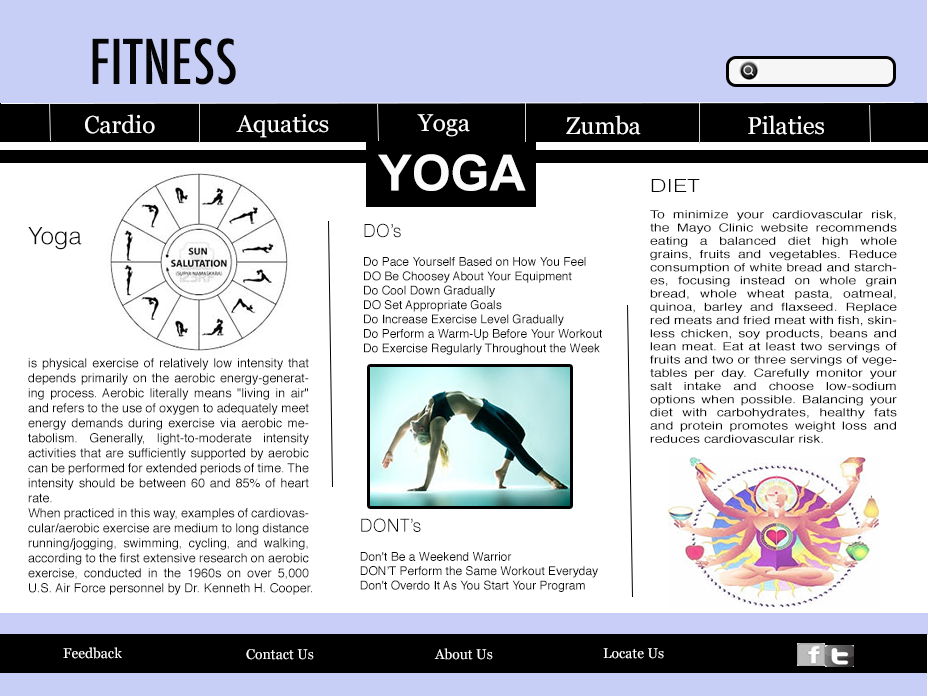
<style>
.page{position:relative;width:928px;height:696px;background:#ffffff}
.page>*{position:absolute;margin:0}
.t1{font:60px "Futura-CondensedMedium";color:#050505}
.t2{font:24px "Georgia";color:#fcfcfd}
.t3{font:50px "Arial-BoldMT";color:#fbfbfb}
.t4{font:11px "Helvetica";color:#080808;scale:1.28 1}
.t5{font:18px "Helvetica-Light";color:#080808;scale:1.28 1}
.t6{font:12.5px "Helvetica";color:#080808}
.t7{font:24px "Helvetica-Light";color:#080808}
.t8{font:12px "Helvetica";color:#080808}
.t9{font:18px "Helvetica-Light";color:#080808}
.t10{font:14px "Georgia";color:#fefdfe}
</style>
<div class="page">
<p class="t1" style="left:92px;top:38px;width:144px;height:47px">FITNESS</p>
<p class="t2" style="left:85px;top:114px;width:70px;height:20px">Cardio</p>
<p class="t2" style="left:236px;top:114px;width:93px;height:24px">Aquatics</p>
<p class="t2" style="left:417px;top:114px;width:53px;height:23px">Yoga</p>
<p class="t2" style="left:566px;top:115px;width:75px;height:20px">Zumba</p>
<p class="t2" style="left:748px;top:115px;width:76px;height:20px">Pilaties</p>
<p class="t3" style="left:378px;top:154px;width:148px;height:37px">YOGA</p>
<p class="t4" style="left:650px;top:179px;width:247px;height:264px"><span class="t5">DIET<br></span><br>To minimize your cardiovascular risk, the Mayo Clinic website recommends eating a balanced diet high whole grains, fruits and vegetables. Reduce consumption of white bread and starches, focusing instead on whole grain bread, whole wheat pasta, oatmeal, quinoa, barley and flaxseed. Replace red meats and fried meat with fish, skinless chicken, soy products, beans and lean meat. Eat at least two servings of fruits and two or three servings of vegetables per day. Carefully monitor your salt intake and choose low-sodium options when possible. Balancing your diet with carbohydrates, healthy fats and protein promotes weight loss and reduces cardiovascular risk.</p>
<p class="t6" style="left:28px;top:227px;width:284px;height:368px"><span class="t7">Yoga<br><br><br><br> <br><br><br></span>is physical exercise of relatively low intensity that depends primarily on the aerobic energy-generating process. Aerobic literally means "living in air" and refers to the use of oxygen to adequately meet energy demands during exercise via aerobic metabolism. Generally, light-to-moderate intensity activities that are sufficiently supported by aerobic can be performed for extended periods of time. The intensity should be between 60 and 85% of heart rate.<br>When practiced in this way, examples of cardiovascular/aerobic exercise are medium to long distance running/jogging, swimming, cycling, and walking, according to the first extensive research on aerobic exercise, conducted in the 1960s on over 5,000 U.S. Air Force personnel by Dr. Kenneth H. Cooper.</p>
<p class="t8" style="left:364px;top:223px;width:238px;height:132px"><span class="t9">DO’s<br></span><br>Do Pace Yourself Based on How You Feel<br>DO Be Choosey About Your Equipment<br>Do Cool Down Gradually<br>DO Set Appropriate Goals<br>Do Increase Exercise Level Gradually<br>Do Perform a Warm-Up Before Your Workout<br>Do Exercise Regularly Throughout the Week</p>
<p class="t8" style="left:360px;top:518px;width:238px;height:74px"><span class="t9">DONT’s<br><br></span>Don't Be a Weekend Warrior<br>DON’T Perform the Same Workout Everyday<br>Don't Overdo It As You Start Your Program</p>
<p class="t10" style="left:63px;top:647px;width:59px;height:12px">Feedback</p>
<p class="t10" style="left:246px;top:649px;width:68px;height:11px">Contact Us</p>
<p class="t10" style="left:434px;top:648px;width:59px;height:12px">About Us</p>
<p class="t10" style="left:603px;top:648px;width:61px;height:11px">Locate Us</p>
</div>
